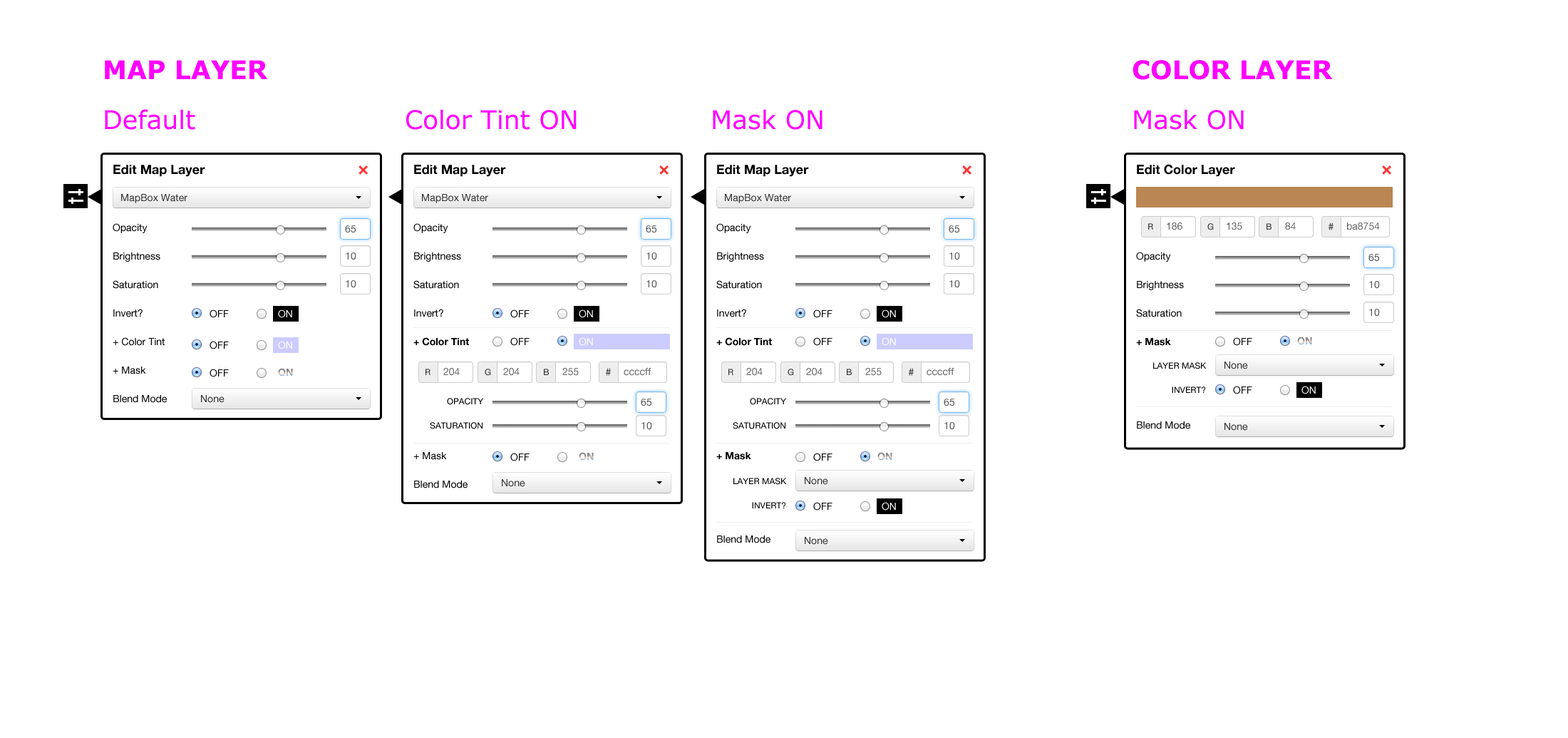
<style>
.page{position:relative;width:1568px;height:738px;background:#ffffff}
.page>*{position:absolute;margin:0}
.t1{font:25.7px "Verdana-Bold";color:#ff00ff}
.t2{font:25.7px "Verdana";color:#ff00ff}
.t3{font:10px/28.5px "HelveticaNeue";color:#000000}
.t4{font:12.8px/28.5px "HelveticaNeue-Bold";color:#000000}
.t5{font:10px/28.5px "HelveticaNeue-Bold";color:#000000}
.t6{font:10px/32.1px "HelveticaNeue";color:#000000}
.t7{font:10px "HelveticaNeue";color:#333333}
.t8{font:8.6px "HelveticaNeue";color:#333333;text-transform:uppercase}
.t9{font:10px "HelveticaNeue";color:#666666}
.t10{font:10px "HelveticaNeue";color:#000000}
.t11{font:10px "HelveticaNeue";color:#ffffff}
.t12{font:8.6px/24.2px "HelveticaNeue";color:#000000;text-transform:uppercase}
</style>
<div class="page">
<p class="t1" style="left:105px;top:60px;width:163px;height:19px">MAP LAYER</p>
<p class="t1" style="left:1133px;top:60px;width:200px;height:20px">COLOR LAYER</p>
<p class="t2" style="left:105px;top:109px;width:90px;height:21px">Default</p>
<p class="t2" style="left:406px;top:109px;width:171px;height:21px">Color Tint ON</p>
<p class="t2" style="left:713px;top:109px;width:109px;height:21px">Mask ON</p>
<p class="t2" style="left:1134px;top:109px;width:110px;height:21px">Mask ON</p>
<p class="t3" style="left:113px;top:165px;width:92px;height:238px"><span class="t4">Edit Map Layer<br></span><br>Opacity<br>Brightness<br>Saturation<br>Invert?<br>+ Color Tint<br>+ Mask<br>Blend Mode</p>
<p class="t3" style="left:413px;top:165px;width:93px;height:323px"><span class="t4">Edit Map Layer<br></span><br>Opacity<br>Brightness<br>Saturation<br>Invert?<br><span class="t5">+ Color Tint<br></span><br><br><br>+ Mask<br>Blend Mode</p>
<p class="t3" style="left:716px;top:165px;width:93px;height:378px"><span class="t4">Edit Map Layer<br></span><br>Opacity<br>Brightness<br>Saturation<br>Invert?<br><span class="t5">+ Color Tint<br><br><br><br>+ Mask<br><br><br></span><span class="t6">Blend Mode</span></p>
<p class="t3" style="left:1136px;top:164px;width:99px;height:265px"><span class="t4">Edit Color Layer<br></span><br><br>Opacity<br>Brightness<br>Saturation<br><span class="t5">+ Mask<br><br><br></span><span class="t6">Blend Mode</span></p>
<p class="t7" style="left:121px;top:194px;width:66px;height:9px">MapBox Water</p>
<p class="t7" style="left:422px;top:194px;width:66px;height:9px">MapBox Water</p>
<p class="t7" style="left:725px;top:194px;width:66px;height:9px">MapBox Water</p>
<p class="t8" style="left:1148px;top:223px;width:5px;height:6px">R</p>
<p class="t9" style="left:1167px;top:222px;width:15px;height:8px">186</p>
<p class="t8" style="left:1207px;top:223px;width:7px;height:7px">G</p>
<p class="t9" style="left:1227px;top:222px;width:15px;height:8px">135</p>
<p class="t8" style="left:1267px;top:223px;width:5px;height:6px">B</p>
<p class="t9" style="left:1285px;top:222px;width:11px;height:8px">84</p>
<p class="t9" style="left:1347px;top:222px;width:33px;height:8px">ba8754</p>
<p class="t10" style="left:210px;top:309px;width:19px;height:9px">OFF</p>
<p class="t11" style="left:278px;top:309px;width:14px;height:9px">ON</p>
<p class="t10" style="left:510px;top:309px;width:20px;height:9px">OFF</p>
<p class="t11" style="left:579px;top:309px;width:14px;height:9px">ON</p>
<p class="t10" style="left:813px;top:309px;width:19px;height:9px">OFF</p>
<p class="t11" style="left:882px;top:309px;width:14px;height:9px">ON</p>
<p class="t10" style="left:210px;top:341px;width:19px;height:8px">OFF</p>
<p class="t11" style="left:278px;top:341px;width:14px;height:8px">ON</p>
<p class="t10" style="left:510px;top:337px;width:20px;height:9px">OFF</p>
<p class="t11" style="left:579px;top:337px;width:14px;height:9px">ON</p>
<p class="t10" style="left:813px;top:337px;width:19px;height:9px">OFF</p>
<p class="t11" style="left:882px;top:337px;width:14px;height:9px">ON</p>
<p class="t10" style="left:1233px;top:337px;width:19px;height:9px">OFF</p>
<p class="t12" style="left:1153px;top:362px;width:54px;height:31px;text-align:right">LAYER MASK<br>INVERT?</p>
<p class="t7" style="left:1224px;top:361px;width:24px;height:8px">None</p>
<p class="t10" style="left:210px;top:368px;width:19px;height:9px">OFF</p>
<p class="t8" style="left:425px;top:368px;width:5px;height:7px">R</p>
<p class="t9" style="left:443px;top:368px;width:17px;height:8px">204</p>
<p class="t8" style="left:485px;top:368px;width:6px;height:8px">G</p>
<p class="t9" style="left:503px;top:368px;width:17px;height:8px">204</p>
<p class="t8" style="left:544px;top:368px;width:5px;height:7px">B</p>
<p class="t9" style="left:562px;top:368px;width:17px;height:8px">255</p>
<p class="t9" style="left:624px;top:368px;width:27px;height:8px">ccccff</p>
<p class="t8" style="left:728px;top:368px;width:5px;height:7px">R</p>
<p class="t9" style="left:746px;top:368px;width:17px;height:8px">204</p>
<p class="t8" style="left:788px;top:368px;width:6px;height:8px">G</p>
<p class="t9" style="left:806px;top:368px;width:16px;height:8px">204</p>
<p class="t8" style="left:847px;top:368px;width:5px;height:7px">B</p>
<p class="t9" style="left:865px;top:368px;width:17px;height:8px">255</p>
<p class="t9" style="left:927px;top:368px;width:27px;height:8px">ccccff</p>
<p class="t10" style="left:1233px;top:386px;width:19px;height:8px">OFF</p>
<p class="t11" style="left:1301px;top:386px;width:15px;height:8px">ON</p>
<p class="t7" style="left:201px;top:395px;width:24px;height:8px">None</p>
<p class="t12" style="left:430px;top:398px;width:53px;height:31px;text-align:right">OPACITY<br>Saturation</p>
<p class="t12" style="left:733px;top:398px;width:53px;height:31px;text-align:right">OPACITY<br>Saturation</p>
<p class="t7" style="left:1224px;top:423px;width:24px;height:7px">None</p>
<p class="t10" style="left:510px;top:453px;width:20px;height:8px">OFF</p>
<p class="t10" style="left:813px;top:453px;width:19px;height:8px">OFF</p>
<p class="t7" style="left:502px;top:479px;width:23px;height:8px">None</p>
<p class="t12" style="left:733px;top:478px;width:54px;height:30px;text-align:right">LAYER MASK<br>INVERT?</p>
<p class="t7" style="left:805px;top:477px;width:23px;height:8px">None</p>
<p class="t10" style="left:813px;top:502px;width:19px;height:8px">OFF</p>
<p class="t11" style="left:882px;top:502px;width:14px;height:8px">ON</p>
<p class="t7" style="left:805px;top:537px;width:23px;height:8px">None</p>
</div>
